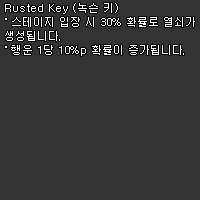
<style>
.page{position:relative;width:200px;height:200px;background:#333333}
.page>*{position:absolute;margin:0}
.t1{font:11px/14px "Dotum";color:#ffffff}
</style>
<div class="page">
<p class="t1" style="left:5px;top:3px;width:190px;height:53px">Rusted Key (녹슨 키)<br>˚ 스테이지 입장 시 30% 확률로 열쇠가<br>생성됩니다.<br>˚ 행운 1당 10%p 확률이 증가됩니다.</p>
</div>
